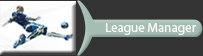
<style>
.page{position:relative;width:203px;height:56px;background:#333333}
.page>*{position:absolute;margin:0}
.t1{font:13px "MyriadPro-Regular";color:#ffffff}
</style>
<div class="page">
<p class="t1" style="left:106px;top:23px;width:90px;height:12px">League Manager</p>
</div>
